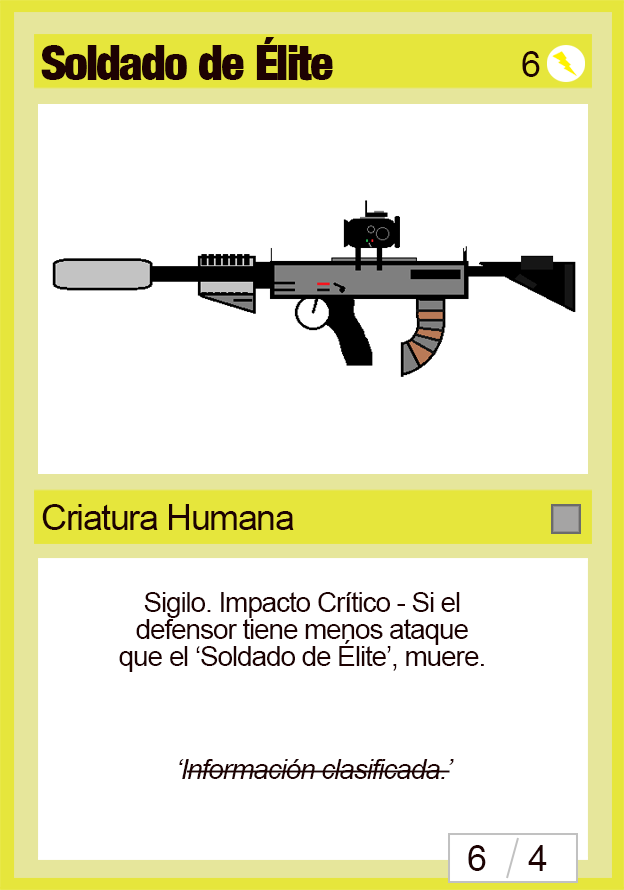
<style>
.page{position:relative;width:624px;height:890px;background:#ffffff}
.page>*{position:absolute;margin:0}
.t1{font:48px "Harvest";letter-spacing:-0.04em;color:#1d0202}
.t2{font:36px "ArialMT";letter-spacing:-0.04em;color:#1d0202}
.t3{font:28px/27px "ArialMT";letter-spacing:-0.04em;color:#1d0202}
.t4{font:28px "Arial-ItalicMT";letter-spacing:-0.04em;color:#1d0202}
</style>
<div class="page">
<p class="t1" style="left:41px;top:37px;width:292px;height:44px">Soldado de Élite</p>
<p class="t2" style="left:522px;top:51px;width:18px;height:26px">6</p>
<p class="t2" style="left:42px;top:504px;width:252px;height:26px">Criatura Humana</p>
<p class="t3" style="left:119px;top:592px;width:365px;height:80px;text-align:center">Sigilo. Impacto Crítico - Si el defensor tiene menos ataque que el ‘Soldado de Élite’, muere.</p>
<p class="t4" style="left:179px;top:759px;width:275px;height:20px">‘Información clasificada.’</p>
<p class="t2" style="left:468px;top:845px;width:18px;height:26px">6</p>
<p class="t2" style="left:528px;top:845px;width:19px;height:26px">4</p>
</div>
